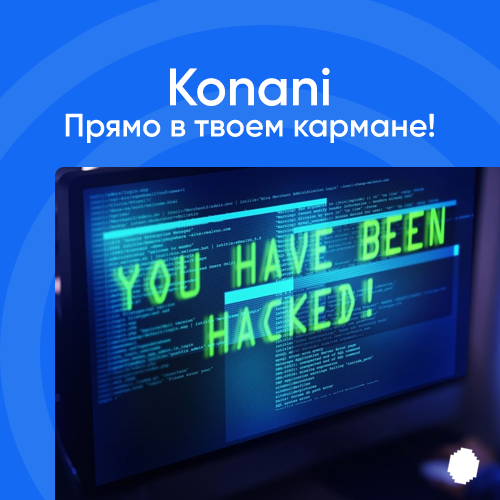
<style>
.page{position:relative;width:500px;height:500px;background:#146af3}
.page>*{position:absolute;margin:0}
.t1{font:52.5px "Gilroy-SemiBold";color:#ffffff}
.t2{font:32.5px "Gilroy-Semibold";color:#ffffff}
</style>
<div class="page">
<p class="t1" style="left:170px;top:67px;width:160px;height:39px">Konani</p>
<p class="t2" style="left:65px;top:113px;width:369px;height:30px">Прямо в твоем кармане!</p>
</div>
